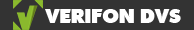
<style>
.page{position:relative;width:194px;height:30px;background:#333333}
.page>*{position:absolute;margin:0}
.t1{font:20.1px "OpineHeavy";color:#ffffff}
</style>
<div class="page">
<p class="t1" style="left:45px;top:9px;width:136px;height:14px">VERIFON DVS</p>
</div>
